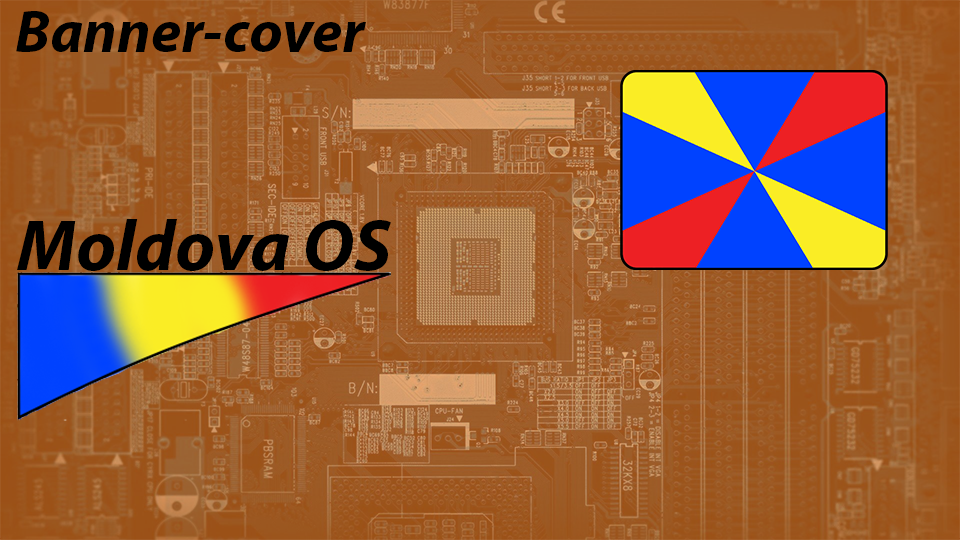
<style>
.page{position:relative;width:960px;height:540px}
.page>*{position:absolute;margin:0}
.t1{font:60px "MyriadPro-BoldIt";color:#000000}
.t2{font:72px "MyriadPro-BoldIt";color:#000000}
</style>
<div class="page">
<p class="t1" style="left:16px;top:11px;width:350px;height:41px">Banner-cover</p>
<p class="t2" style="left:17px;top:219px;width:374px;height:52px">Moldova OS</p>
</div>
